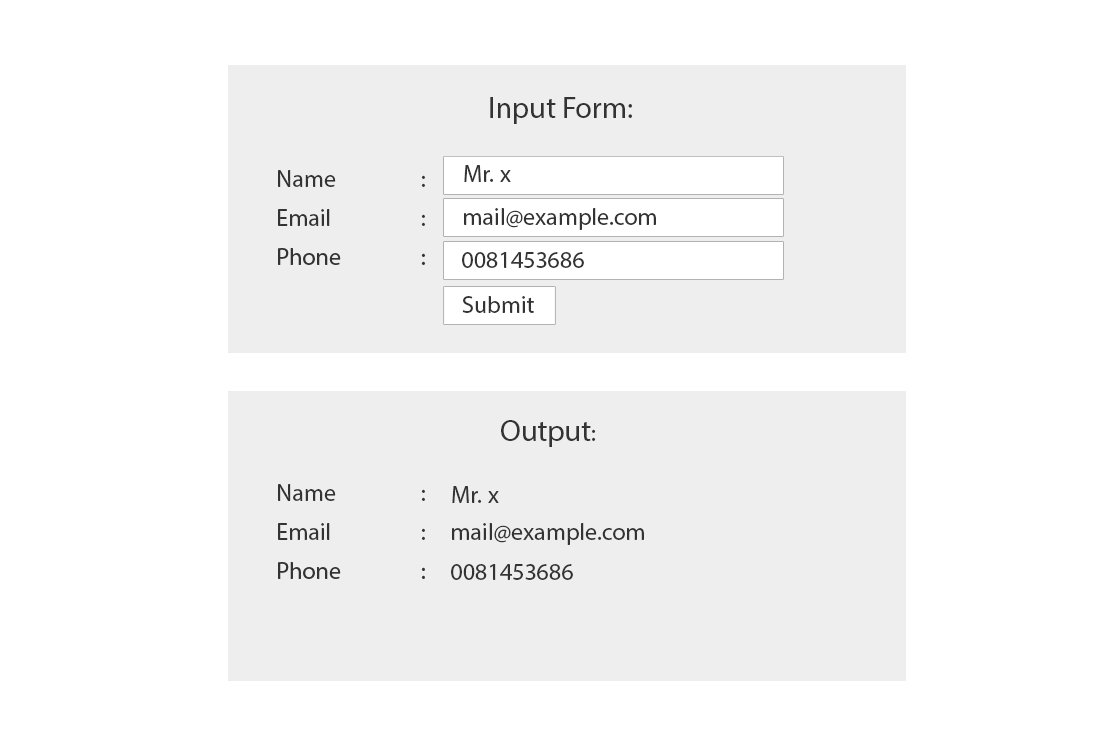
<style>
.page{position:relative;width:1116px;height:743px;background:#ffffff}
.page>*{position:absolute;margin:0}
.t1{font:30px "MyriadPro-Regular";color:#333333}
.t2{font:24px "MyriadPro-Regular";color:#333333}
</style>
<div class="page">
<p class="t1" style="left:490px;top:97px;width:142px;height:27px">Input Form:</p>
<p class="t2" style="left:278px;top:170px;width:147px;height:17px">Name   :</p>
<p class="t2" style="left:464px;top:165px;width:47px;height:17px">Mr. x</p>
<p class="t2" style="left:278px;top:209px;width:147px;height:17px">Email   :</p>
<p class="t2" style="left:464px;top:208px;width:192px;height:22px">mail@example.com</p>
<p class="t2" style="left:462px;top:252px;width:122px;height:16px">0081453686</p>
<p class="t2" style="left:462px;top:296px;width:72px;height:17px">Submit</p>
<p class="t1" style="left:501px;top:420px;width:95px;height:27px">Output<span class="t2">:</span></p>
<p class="t2" style="left:278px;top:484px;width:147px;height:17px">Name   :</p>
<p class="t2" style="left:452px;top:486px;width:47px;height:17px">Mr. x</p>
<p class="t2" style="left:278px;top:523px;width:147px;height:17px">Email   :</p>
<p class="t2" style="left:452px;top:523px;width:192px;height:22px">mail@example.com</p>
<p class="t2" style="left:451px;top:564px;width:122px;height:16px">0081453686</p>
</div>
